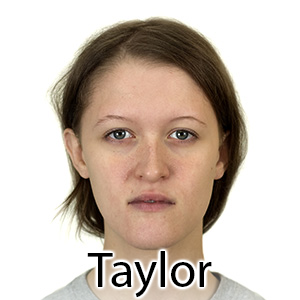
<style>
.page{position:relative;width:300px;height:300px;background:#ffffff}
.page>*{position:absolute;margin:0}
.t1{font:50px "MyriadPro-Regular";color:#000000}
</style>
<div class="page">
<p class="t1" style="left:87px;top:251px;width:125px;height:47px">Taylor</p>
</div>
